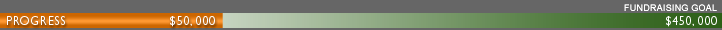
<style>
.page{position:relative;width:722px;height:30px;background:#666666}
.page>*{position:absolute;margin:0}
.t1{font:9px "ArialMT";letter-spacing:0.025em;color:#ffffff}
.t2{font:12px "GillSans";letter-spacing:0.05em;color:#ffffff}
</style>
<div class="page">
<p class="t1" style="left:624px;top:4px;width:93px;height:7px">FUNDRAISING GOAL</p>
<p class="t2" style="left:7px;top:16px;width:58px;height:9px">PROGRESS</p>
<p class="t2" style="left:170px;top:16px;width:45px;height:11px">$50, 000</p>
<p class="t2" style="left:666px;top:16px;width:51px;height:11px">$450, 000</p>
</div>
